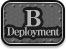
<style>
.page{position:relative;width:66px;height:49px}
.page>*{position:absolute;margin:0}
.t1{font:11px/9px "RyuminPro-ExBold";letter-spacing:-0.08em;color:#b8b8b8}
.t2{font:22px/9px "RyuminPro-ExHeavy";letter-spacing:-0.08em;color:#b8b8b8}
</style>
<div class="page">
<p class="t1" style="left:7px;top:10px;width:53px;height:27px;text-align:center"><span class="t2">B<br></span>Deployment</p>
</div>
